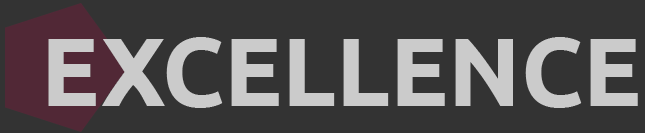
<style>
.page{position:relative;width:645px;height:133px;background:#333333}
.page>*{position:absolute;margin:0}
.t1{font:95.8px "Ubuntu-Bold";color:#cbcbcb}
</style>
<div class="page">
<p class="t1" style="left:48px;top:37px;width:590px;height:71px">EXCELLENCE</p>
</div>
